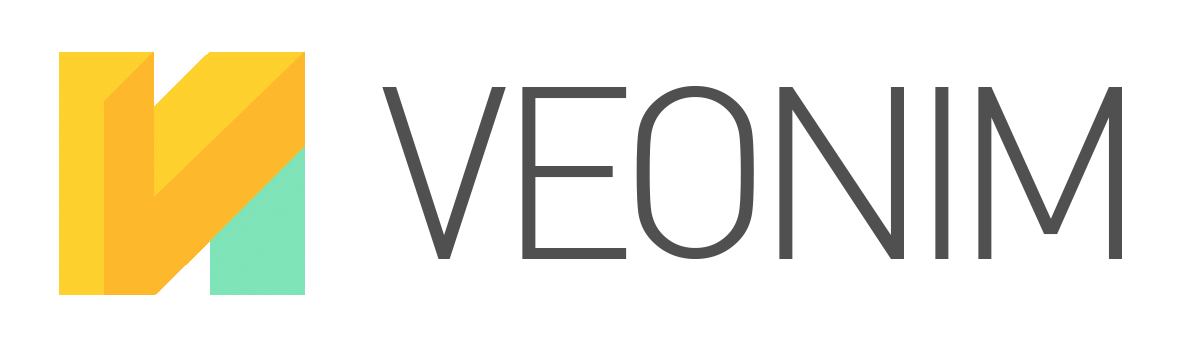
<style>
.page{position:relative;width:1196px;height:350px;background:#ffffff}
.page>*{position:absolute;margin:0}
.t1{font:240px "DINLightAlternate";letter-spacing:-0.05em;color:#505050}
</style>
<div class="page">
<p class="t1" style="left:382px;top:86px;width:740px;height:173px">VEONIM</p>
</div>
